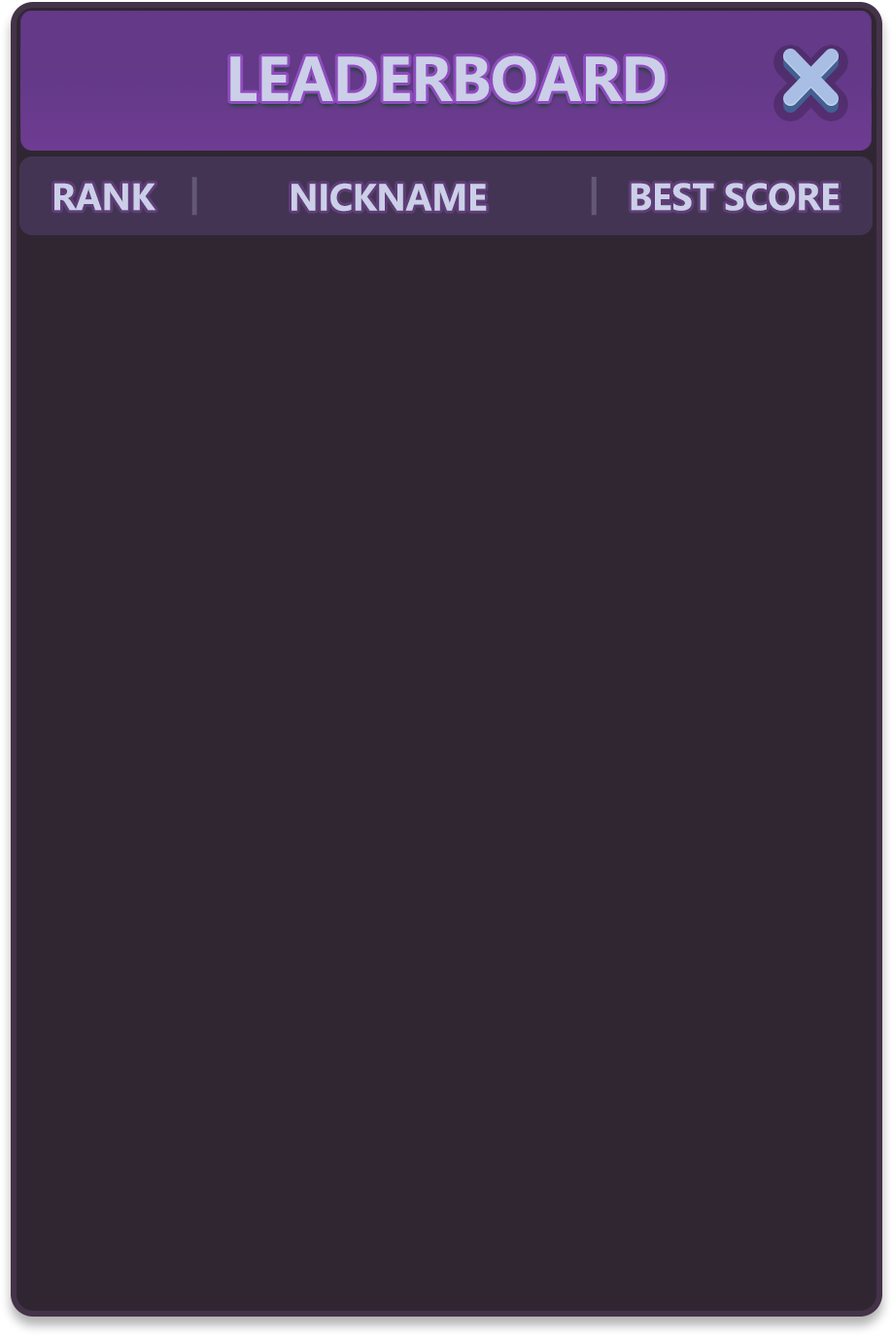
<style>
.page{position:relative;width:893px;height:1336px;background:#302632}
.page>*{position:absolute;margin:0}
.t1{font:35px "MicrosoftYaHei-Bold";letter-spacing:-0.01em;color:#cccfe8;text-transform:uppercase}
.t2{font:35px "MicrosoftYaHei-Bold";letter-spacing:-0.01em;color:#635977;text-transform:uppercase}
</style>
<div class="page">
<p class="t1" style="left:54px;top:183px;width:101px;height:28px">RANK</p>
<p class="t2" style="left:191px;top:177px;width:6px;height:39px">|</p>
<p class="t1" style="left:291px;top:183px;width:196px;height:29px">NICKNAME</p>
<p class="t2" style="left:591px;top:177px;width:5px;height:39px">|</p>
<p class="t1" style="left:630px;top:183px;width:209px;height:28px">BEST SCORE</p>
</div>
